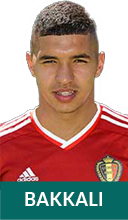
<style>
.page{position:relative;width:128px;height:220px;background:#ffffff}
.page>*{position:absolute;margin:0}
.t1{font:18.3px "Lato-Bold";letter-spacing:0.01em;color:#fffffe;text-transform:uppercase}
</style>
<div class="page">
<p class="t1" style="left:25px;top:192px;width:77px;height:14px">Bakkali</p>
</div>
